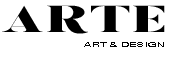
<style>
.page{position:relative;width:195px;height:59px;background:#ffffff}
.page>*{position:absolute;margin:0}
.t1{font:37.5px "Giaza";color:#000000;scale:1.71 1}
.t2{font:6.9px "HelveticaWorld-Regular";color:#000000;scale:1.71 1}
</style>
<div class="page">
<p class="t1" style="left:2px;top:5px;width:163px;height:29px">ARTE</p>
<p class="t2" style="left:84px;top:42px;width:80px;height:5px">ART &amp; DESIGN</p>
</div>
